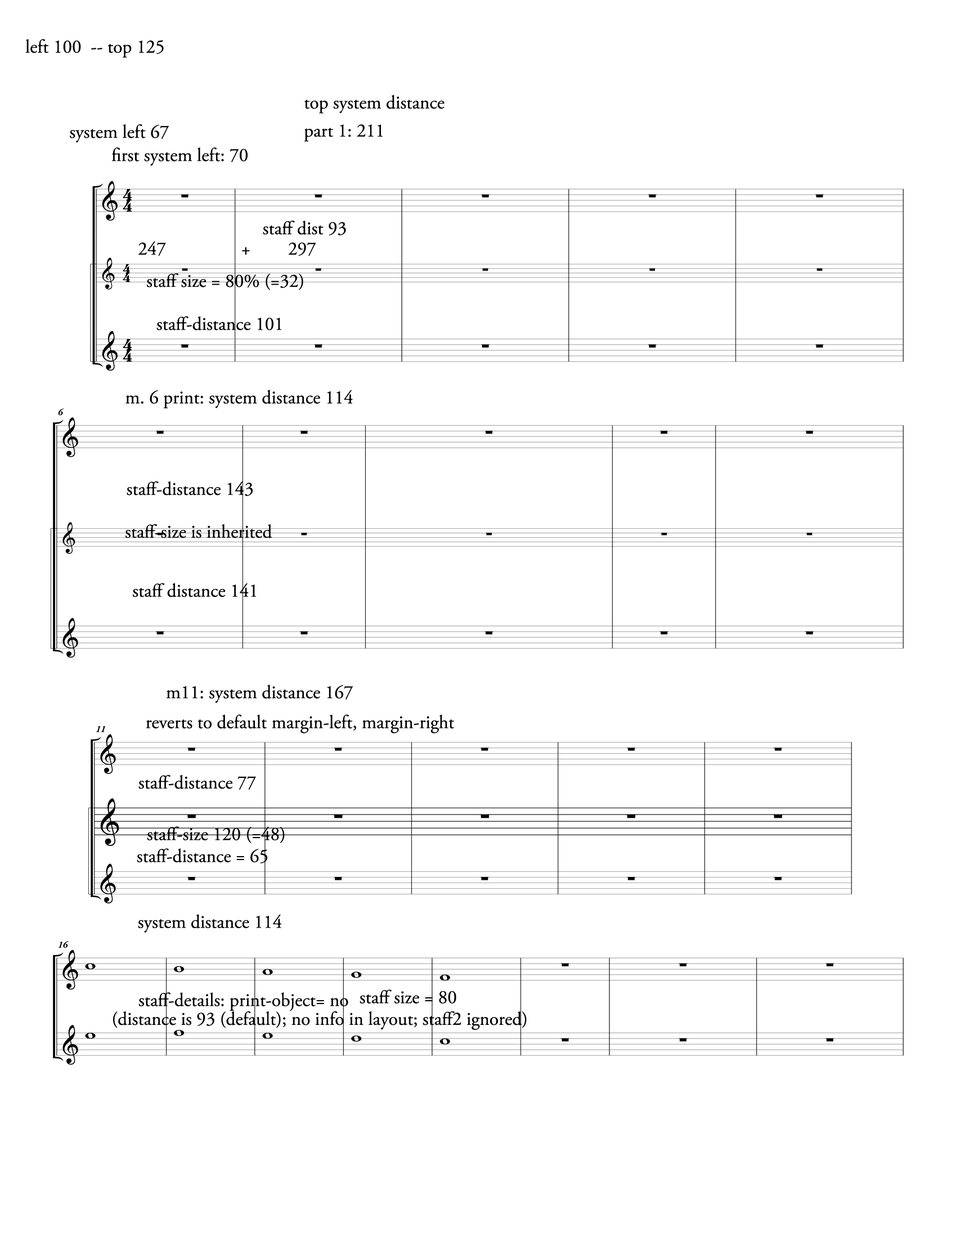
<style>
.page{position:relative;width:960px;height:1242px;background:#ffffff}
.page>*{position:absolute;margin:0}
.t1{font:18.8px "AGaramondPro-Regular";color:#000000}
.t2{font:18.8px/84.4px "AGaramondPro-Regular";color:#000000}
.t3{font:18.8px/28.1px "AGaramondPro-Regular";color:#000000}
</style>
<div class="page">
<p class="t1" style="left:25px;top:39px;width:139px;height:19px">left 100  -- top 125</p>
<p class="t2" style="left:304px;top:95px;width:140px;height:47px">top system distance<span class="t3"><br>part 1: 211</span></p>
<p class="t1" style="left:70px;top:124px;width:99px;height:19px">system left 67</p>
<p class="t1" style="left:112px;top:147px;width:136px;height:19px">first system left: 70</p>
<p class="t1" style="left:263px;top:221px;width:83px;height:15px">staff dist 93</p>
<p class="t1" style="left:138px;top:241px;width:178px;height:15px">247                +        297</p>
<p class="t1" style="left:147px;top:273px;width:156px;height:17px">staff size = 80% (=32)</p>
<p class="t1" style="left:156px;top:316px;width:125px;height:15px">staff-distance 101</p>
<p class="t1" style="left:125px;top:390px;width:228px;height:18px">m. 6 print: system distance 114</p>
<p class="t1" style="left:127px;top:481px;width:126px;height:15px">staff-distance 143</p>
<p class="t1" style="left:125px;top:524px;width:147px;height:14px">staff-size is inherited</p>
<p class="t1" style="left:133px;top:583px;width:123px;height:15px">staff distance 141</p>
<p class="t1" style="left:167px;top:685px;width:186px;height:18px">m11: system distance 167</p>
<p class="t1" style="left:146px;top:715px;width:308px;height:19px">reverts to default margin-left, margin-right</p>
<p class="t1" style="left:138px;top:775px;width:118px;height:15px">staff-distance 77</p>
<p class="t1" style="left:147px;top:827px;width:138px;height:16px">staff-size 120 (=48)</p>
<p class="t1" style="left:137px;top:848px;width:130px;height:16px">staff-distance = 65</p>
<p class="t1" style="left:138px;top:914px;width:143px;height:19px">system distance 114</p>
<p class="t1" style="left:360px;top:990px;width:96px;height:14px">staff size = 80</p>
<p class="t1" style="left:139px;top:992px;width:209px;height:20px">staff-details: print-object= no</p>
<p class="t1" style="left:113px;top:1011px;width:414px;height:19px">(distance is 93 (default); no info in layout; staff2 ignored)</p>
</div>
